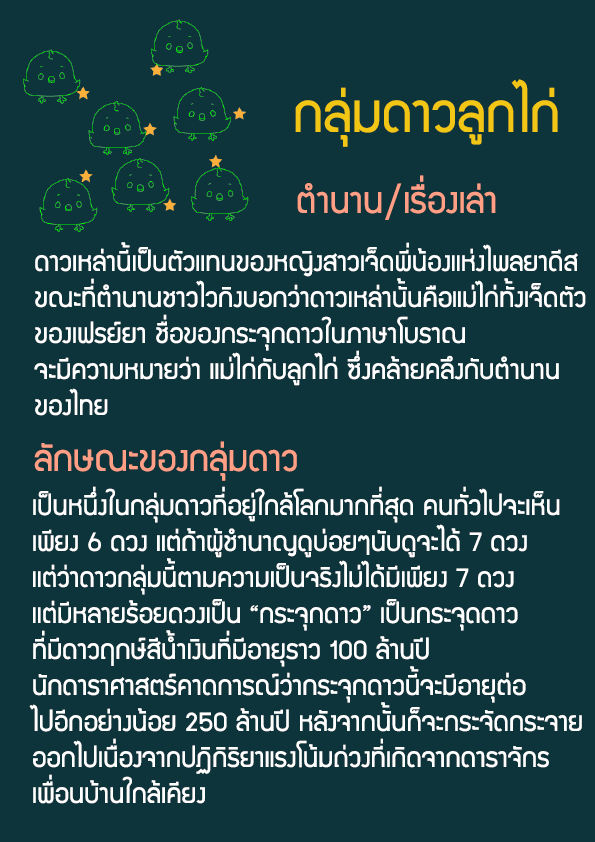
<style>
.page{position:relative;width:595px;height:842px;background:#0e343b}
.page>*{position:absolute;margin:0}
.t1{font:60px "supermarket";color:#f2c614}
.t2{font:40px "supermarket";color:#ff9f86}
.t3{font:30px "supermarket";color:#ffffff}
</style>
<div class="page">
<p class="t1" style="left:295px;top:79px;width:263px;height:68px">กลุ่มดาวลูกไก่</p>
<p class="t2" style="left:297px;top:175px;width:199px;height:45px">ตำนาน/เรื่องเล่า</p>
<p class="t3" style="left:34px;top:242px;width:552px;height:174px">ดาวเหล่านี้เป็นตัวแทนของหญิงสาวเจ็ดพี่น้องแห่งไพลยาดีส <br>ขณะที่ตำนานชาวไวกิงบอกว่าดาวเหล่านั้นคือแม่ไก่ทั้งเจ็ดตัว<br>ของเฟรย์ยา ชื่อของกระจุกดาวในภาษาโบราณ <br>จะมีความหมายว่า แม่ไก่กับลูกไก่ ซึ่งคล้ายคลึงกับตำนาน<br>ของไทย</p>
<p class="t2" style="left:34px;top:441px;width:263px;height:40px">ลักษณะของกลุ่มดาว</p>
<p class="t3" style="left:29px;top:486px;width:553px;height:318px">เป็นหนึ่งในกลุ่มดาวที่อยู่ใกล้โลกมากที่สุด คนทั่วไปจะเห็น<br>เพียง 6 ดวง แต่ถ้าผู้ชำนาญดูบ่อยๆนับดูจะได้ 7 ดวง <br>แต่ว่าดาวกลุ่มนี้ตามความเป็นจริงไม่ได้มีเพียง 7 ดวง<br>แต่มีหลายร้อยดวงเป็น “กระจุกดาว” เป็นกระจุดดาว<br>ที่มีดาวฤกษ์สีน้ำเงินที่มีอายุราว 100 ล้านปี <br>นักดาราศาสตร์คาดการณ์ว่ากระจุกดาวนี้จะมีอายุต่อ<br>ไปอีกอย่างน้อย 250 ล้านปี หลังจากนั้นก็จะกระจัดกระจาย<br>ออกไปเนื่องจากปฏิกิริยาแรงโน้มถ่วงที่เกิดจากดาราจักร<br>เพื่อนบ้านใกล้เคียง</p>
</div>
